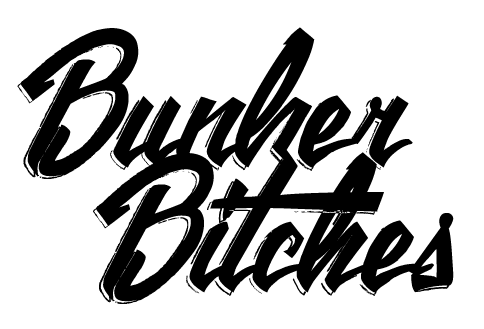
<style>
.page{position:relative;width:484px;height:329px;background:#ffffff}
.page>*{position:absolute;margin:0}
.t1{font:300px/125px "the-Citizens";color:#000000}
.t2{font:300px/125px "the-Citizens";color:#000000;text-transform:uppercase}
</style>
<div class="page">
<p class="t1" style="left:17px;top:27px;width:437px;height:277px;text-align:center"><span class="t2">B</span>unker <br>  Bitches</p>
</div>
